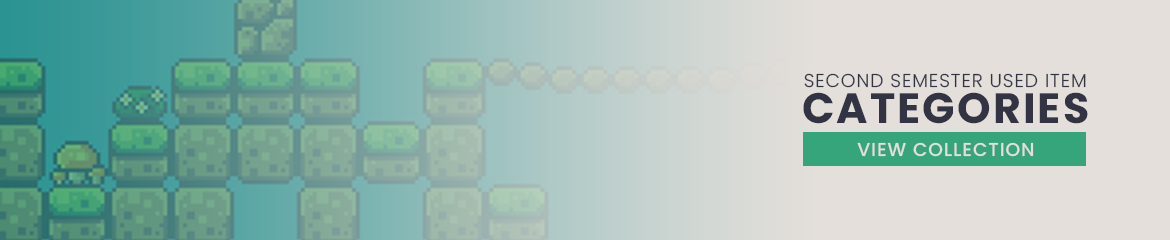
<style>
.page{position:relative;width:1170px;height:240px;background:#e4dfdb}
.page>*{position:absolute;margin:0}
.t1{font:18.6px "Poppins-Light";letter-spacing:0.05em;color:#323443}
.t2{font:42.6px "Poppins-Bold";letter-spacing:0.05em;color:#323443}
.t3{font:18.6px "Poppins-Medium";letter-spacing:0.05em;color:#e4dfdb}
</style>
<div class="page">
<p class="t1" style="left:804px;top:73px;width:282px;height:15px">SECOND SEMESTER USED ITEM</p>
<p class="t2" style="left:803px;top:92px;width:285px;height:32px">CATEGORIES</p>
<p class="t3" style="left:857px;top:142px;width:177px;height:15px">VIEW COLLECTION</p>
</div>
